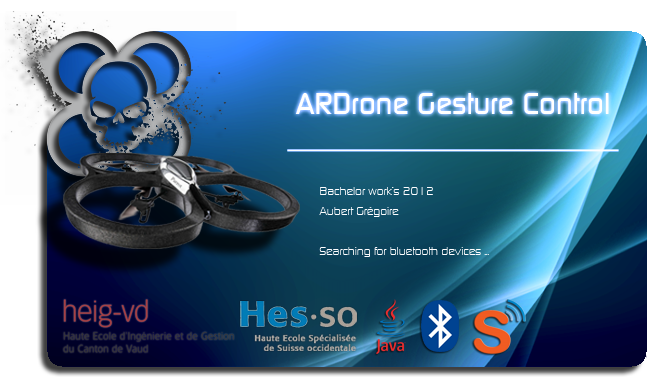
<style>
.page{position:relative;width:652px;height:382px}
.page>*{position:absolute;margin:0}
.t1{font:30px "ContinuumMedium";color:#ffffff}
.t2{font:12px/20px "ContinuumLight";color:#fdfeff}
</style>
<div class="page">
<p class="t1" style="left:295px;top:93px;width:314px;height:21px">ARDrone Gesture Control</p>
<p class="t2" style="left:319px;top:187px;width:170px;height:70px">Bachelor work‘s 2012<br>Aubert Grégoire<br><br>Searching for bluetooth devices ...</p>
</div>
